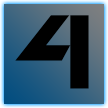
<style>
.page{position:relative;width:108px;height:108px;background:#000000}
.page>*{position:absolute;margin:0}
.t1{font:150px "ROBOTECHGP";color:#000000}
</style>
<div class="page">
<p class="t1" style="left:15px;top:15px;width:74px;height:74px">4</p>
</div>
